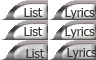
<style>
.page{position:relative;width:96px;height:60px;background:#ffffff}
.page>*{position:absolute;margin:0}
.t1{font:12px "Tahoma";color:#393838}
</style>
<div class="page">
<p class="t1" style="left:24px;top:8px;width:19px;height:9px">List</p>
<p class="t1" style="left:65px;top:8px;width:30px;height:11px">Lyrics</p>
<p class="t1" style="left:24px;top:27px;width:19px;height:9px">List</p>
<p class="t1" style="left:65px;top:27px;width:30px;height:11px">Lyrics</p>
<p class="t1" style="left:26px;top:49px;width:19px;height:9px">List</p>
<p class="t1" style="left:67px;top:48px;width:30px;height:11px">Lyrics</p>
</div>
